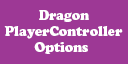
<style>
.page{position:relative;width:128px;height:64px;background:#9d3895}
.page>*{position:absolute;margin:0}
.t1{font:13.1px "CooperBlackStd";color:#ffffff}
</style>
<div class="page">
<p class="t1" style="left:4px;top:10px;width:119px;height:44px;text-align:center">Dragon <br>PlayerController <br>Options</p>
</div>
